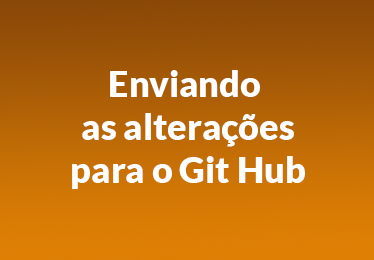
<style>
.page{position:relative;width:374px;height:260px}
.page>*{position:absolute;margin:0}
.t1{font:36px "Lato-Black";color:#ffffff}
</style>
<div class="page">
<p class="t1" style="left:72px;top:70px;width:233px;height:119px;text-align:center">Enviando <br>as alterações<br>para o Git Hub</p>
</div>
